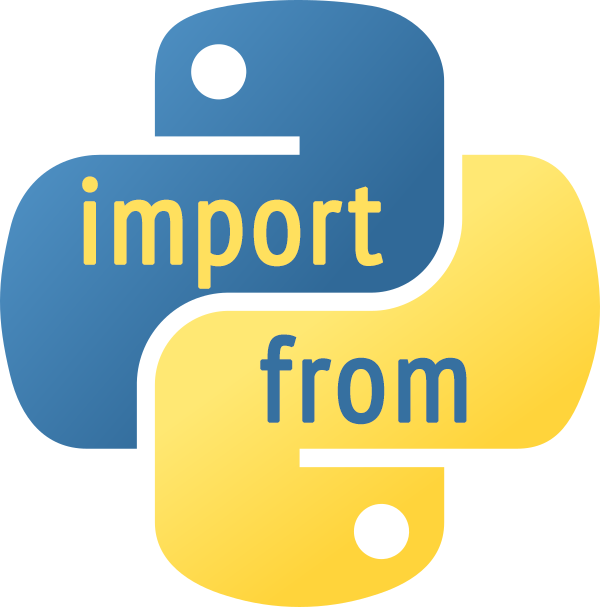
<style>
.page{position:relative;width:600px;height:607px;background:#ffffff}
.page>*{position:absolute;margin:0}
.t1{font:120px "PTSans-Narrow";letter-spacing:0.02em;color:#ffe05e;font-weight:bold}
.t2{font:120px "PTSans-Narrow";letter-spacing:0.02em;color:#3670a0;font-weight:bold}
</style>
<div class="page">
<p class="t1" style="left:82px;top:176px;width:301px;height:113px">import</p>
<p class="t2" style="left:260px;top:334px;width:207px;height:91px">from</p>
</div>
